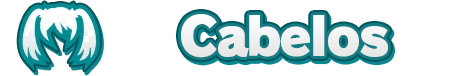
<style>
.page{position:relative;width:458px;height:76px;background:#ffffff}
.page>*{position:absolute;margin:0}
.t1{font:52px "RodinPro-UB";letter-spacing:-0.041em;color:#efeff0}
</style>
<div class="page">
<p class="t1" style="left:181px;top:14px;width:207px;height:44px">Cabelos</p>
</div>
